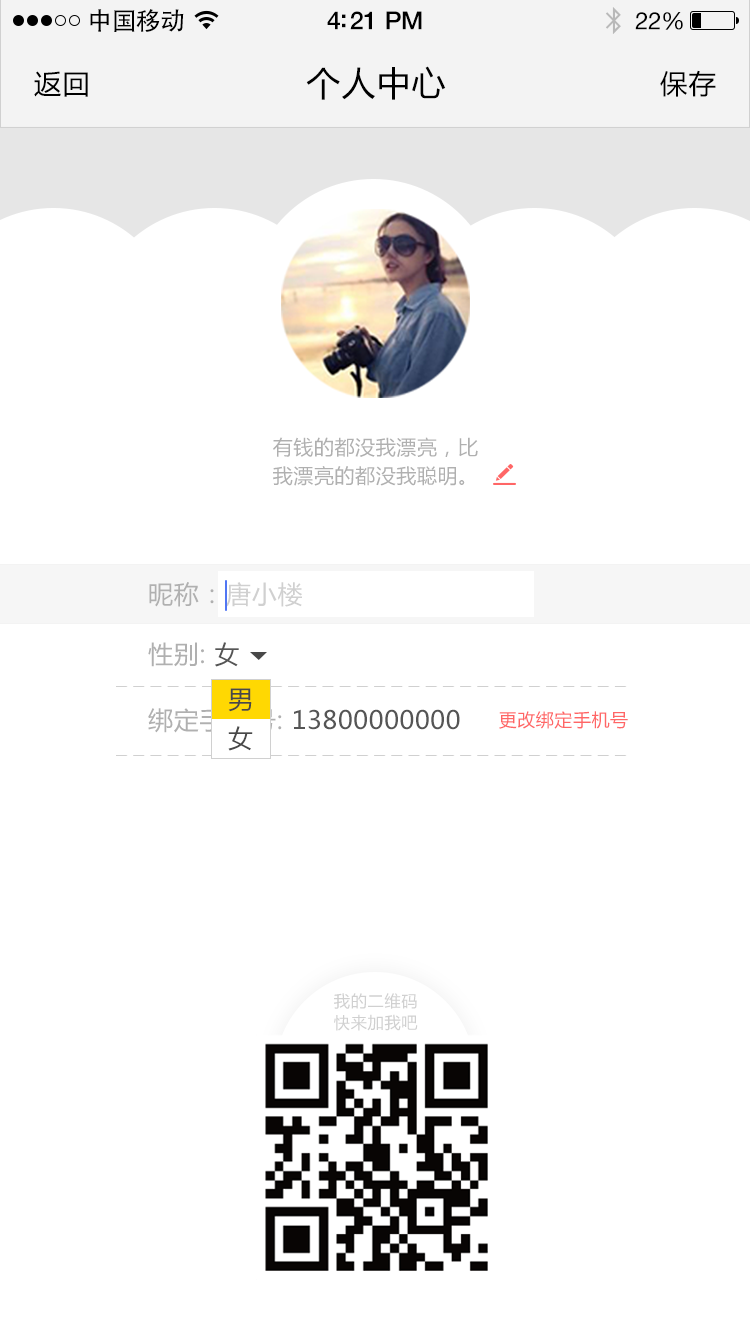
<style>
.page{position:relative;width:750px;height:1334px;background:#ffffff}
.page>*{position:absolute;margin:0}
.t1{font:25px "AdobeHeitiStd-Regular";letter-spacing:-0.025em;color:#000000}
.t2{font:25px "HelveticaNeue-Medium";letter-spacing:-0.02em;color:#000000}
.t3{font:24px "HelveticaNeue";letter-spacing:-0.02em;color:#000000}
.t4{font:27px "MicrosoftYaHei";letter-spacing:0.05em;color:#000000}
.t5{font:34px "MicrosoftYaHei";letter-spacing:0.03em;color:#000000}
.t6{font:20px/70px "MicrosoftYaHei";letter-spacing:0.03em;color:#b0b0b0}
.t7{font:25px "MicrosoftYaHei";letter-spacing:0.03em;color:#b0b0b0}
.t8{font:25px "MicrosoftYaHei";letter-spacing:0.03em;color:#d0d0d0}
.t9{font:25px "MicrosoftYaHei";letter-spacing:0.03em;color:#555555}
.t10{font:25px "MicrosoftYaHei";letter-spacing:0.03em;color:#484848}
.t11{font:18px "MicrosoftYaHei";letter-spacing:0.03em;color:#ff6666}
.t12{font:16.4px "MicrosoftYaHei";letter-spacing:0.03em;color:#d0d0d0}
</style>
<div class="page">
<p class="t1" style="left:90px;top:9px;width:94px;height:23px">中国移动</p>
<p class="t2" style="left:327px;top:11px;width:95px;height:19px">4:21 PM</p>
<p class="t3" style="left:635px;top:12px;width:48px;height:18px">22%</p>
<p class="t4" style="left:34px;top:71px;width:54px;height:26px">返回</p>
<p class="t5" style="left:306px;top:66px;width:140px;height:34px">个人中心</p>
<p class="t4" style="left:660px;top:70px;width:56px;height:27px">保存</p>
<p class="t6" style="left:273px;top:437px;width:205px;height:49px">有钱的都没我漂亮，比<br>我漂亮的都没我聪明。</p>
<p class="t7" style="left:149px;top:582px;width:65px;height:25px">昵称：</p>
<p class="t8" style="left:226px;top:582px;width:76px;height:25px">唐小楼</p>
<p class="t7" style="left:148px;top:642px;width:91px;height:25px">性别: <span class="t9">女</span></p>
<p class="t10" style="left:228px;top:688px;width:24px;height:24px">男</p>
<p class="t9" style="left:148px;top:708px;width:312px;height:25px"><span class="t7">绑定手机号: </span>13800000000</p>
<p class="t11" style="left:499px;top:711px;width:129px;height:18px">更改绑定手机号</p>
<p class="t10" style="left:228px;top:726px;width:25px;height:25px">女</p>
<p class="t12" style="left:334px;top:993px;width:83px;height:16px">我的二维码</p>
<p class="t12" style="left:334px;top:1014px;width:84px;height:17px">快来加我吧</p>
</div>
